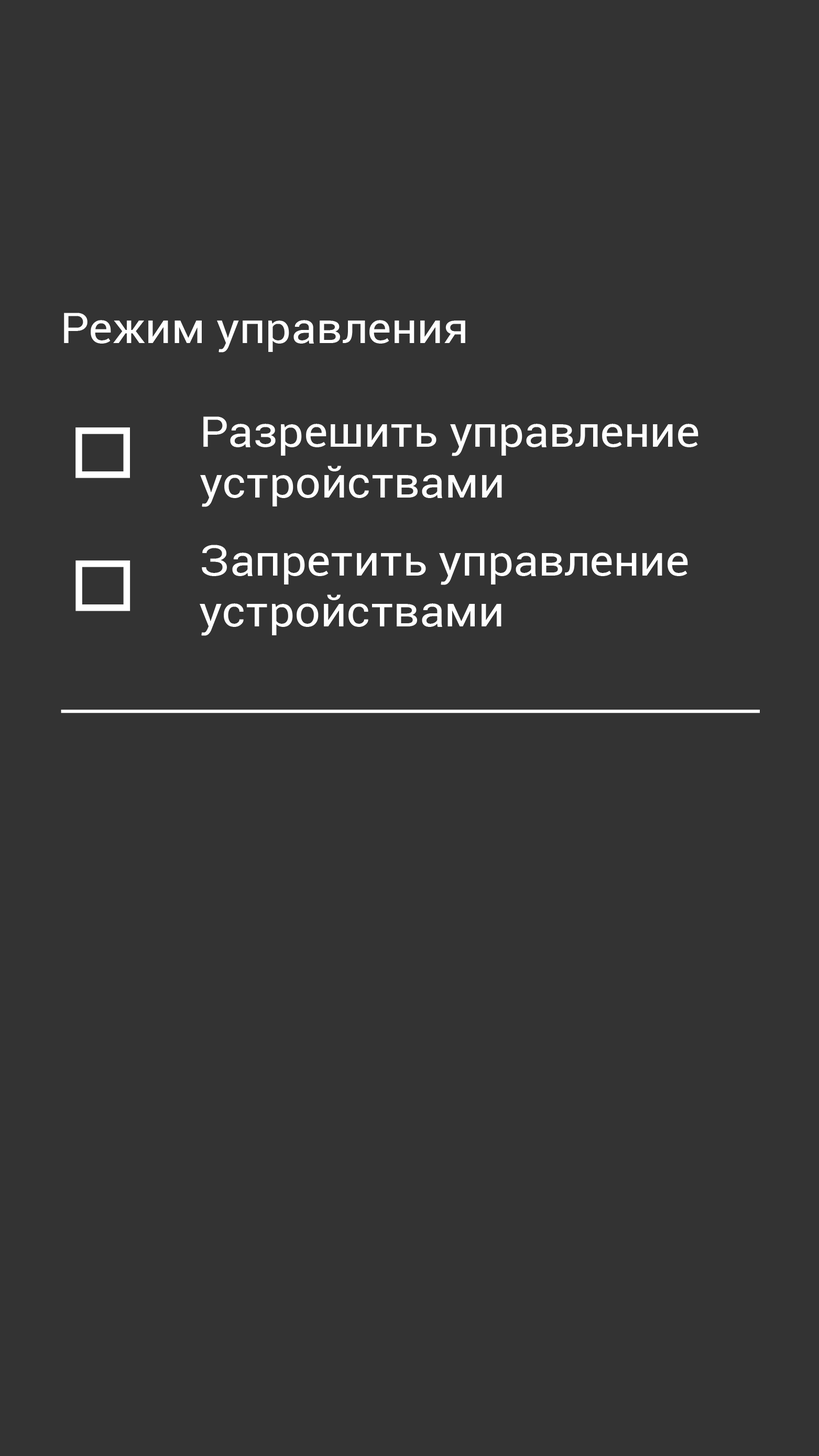
<style>
.page{position:relative;width:819px;height:1456px;background:#333333}
.page>*{position:absolute;margin:0}
.t1{font:42.2px "Roboto-Regular";color:#ffffff;scale:1.08 1}
</style>
<div class="page">
<p class="t1" style="left:64px;top:313px;width:401px;height:40px">Режим управления</p>
<p class="t1" style="left:200px;top:416px;width:498px;height:91px">Разрешить управление <br>устройствами</p>
<p class="t1" style="left:200px;top:545px;width:488px;height:91px">Запретить управление <br>устройствами</p>
</div>
